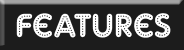
<style>
.page{position:relative;width:184px;height:50px;background:#1c1c1c}
.page>*{position:absolute;margin:0}
.t1{font:33.3px "AdamGorry-Lights";color:#ffffff}
</style>
<div class="page">
<p class="t1" style="left:16px;top:13px;width:155px;height:25px">Features</p>
</div>
